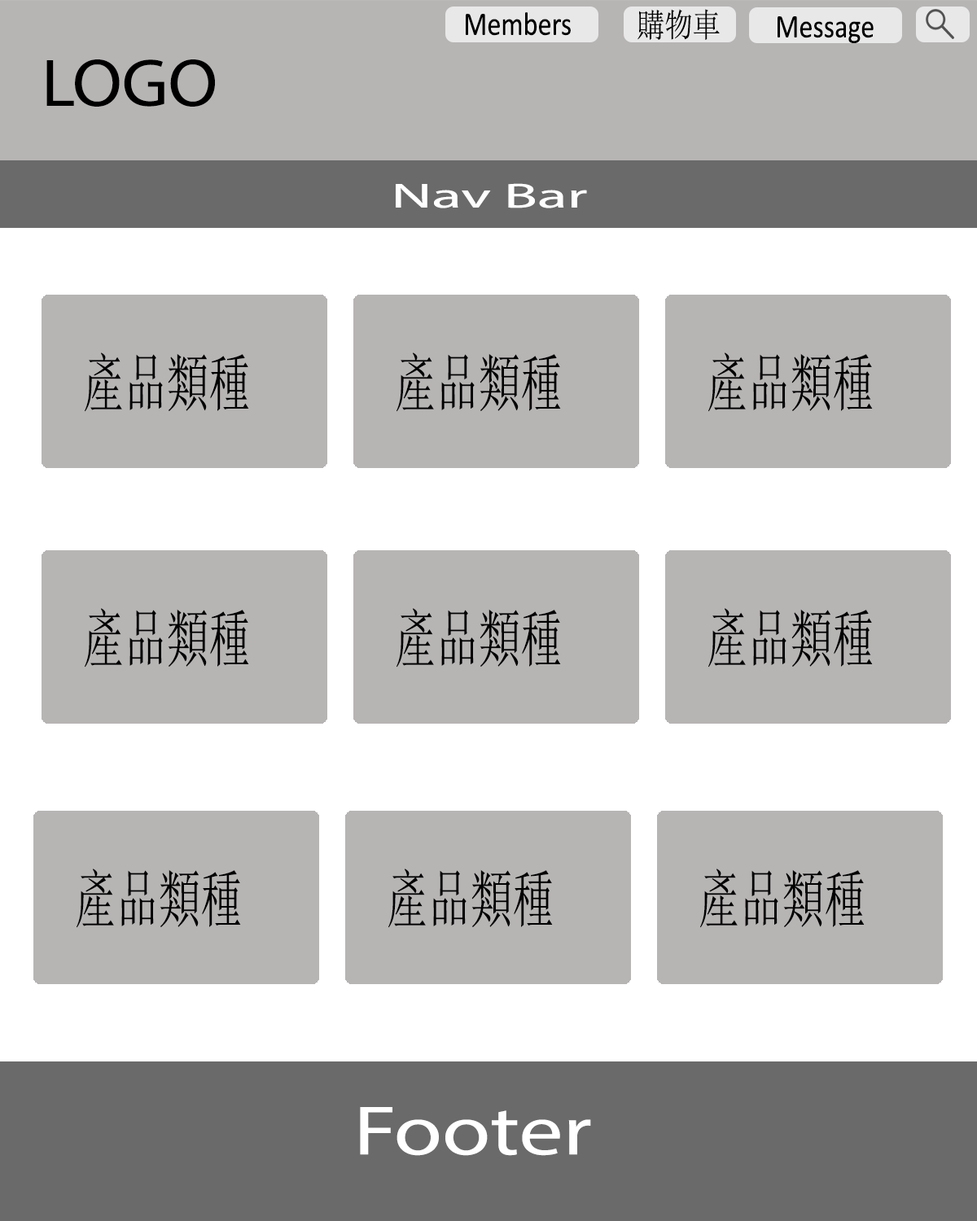
<style>
.page{position:relative;width:977px;height:1221px;background:#b7b4b4}
.page>*{position:absolute;margin:0}
.t1{font:32.9px "Calibri";color:#000000;scale:0.84 1}
.t2{font:32.9px "SimSun";color:#000000;scale:0.84 1}
.t3{font:67.6px "MyriadPro-Regular";color:#000000;scale:1.06 1}
.t4{font:34.9px "MyriadPro-Regular";color:#ffffff;scale:1.77 1}
.t5{font:63.4px "SimSun";color:#010101;scale:0.66 1}
.t6{font:70.2px "MyriadPro-Regular";color:#ffffff;scale:1.25 1}
</style>
<div class="page">
<p class="t1" style="left:466px;top:12px;width:105px;height:24px">Members</p>
<p class="t2" style="left:637px;top:9px;width:83px;height:31px">購物車</p>
<p class="t1" style="left:777px;top:16px;width:96px;height:27px">Message</p>
<p class="t3" style="left:46px;top:59px;width:169px;height:48px">LOGO</p>
<p class="t4" style="left:396px;top:183px;width:191px;height:25px">Nav Bar</p>
<p class="t5" style="left:85px;top:352px;width:164px;height:60px">產品類種</p>
<p class="t5" style="left:396px;top:352px;width:165px;height:60px">產品類種</p>
<p class="t5" style="left:708px;top:352px;width:165px;height:60px">產品類種</p>
<p class="t5" style="left:85px;top:608px;width:164px;height:59px">產品類種</p>
<p class="t5" style="left:396px;top:608px;width:165px;height:59px">產品類種</p>
<p class="t5" style="left:708px;top:608px;width:165px;height:59px">產品類種</p>
<p class="t5" style="left:77px;top:868px;width:164px;height:60px">產品類種</p>
<p class="t5" style="left:388px;top:868px;width:165px;height:60px">產品類種</p>
<p class="t5" style="left:700px;top:868px;width:164px;height:60px">產品類種</p>
<p class="t6" style="left:360px;top:1107px;width:231px;height:49px">Footer</p>
</div>
